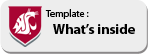
<style>
.page{position:relative;width:150px;height:55px;background:#ededed}
.page>*{position:absolute;margin:0}
.t1{font:10px "MyriadPro-Regular";color:#000000}
.t2{font:14px "MyriadPro-Bold";color:#000000}
</style>
<div class="page">
<p class="t1" style="left:45px;top:9px;width:44px;height:10px">Template :</p>
<p class="t2" style="left:53px;top:24px;width:82px;height:10px">What’s inside</p>
</div>
